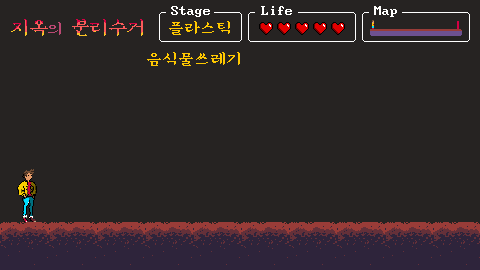
<style>
.page{position:relative;width:480px;height:270px;background:#262322}
.page>*{position:absolute;margin:0}
.t1{font:16px "DOSMyungjo";color:#fffffe}
.t2{font:16px "DOSMyungjo";color:#ffc800}
</style>
<div class="page">
<p class="t1" style="left:171px;top:6px;width:39px;height:11px">Stage</p>
<p class="t1" style="left:261px;top:6px;width:31px;height:9px">Life</p>
<p class="t1" style="left:374px;top:6px;width:23px;height:11px">Map</p>
<p class="t2" style="left:147px;top:52px;width:93px;height:14px">음식물쓰레기</p>
</div>
